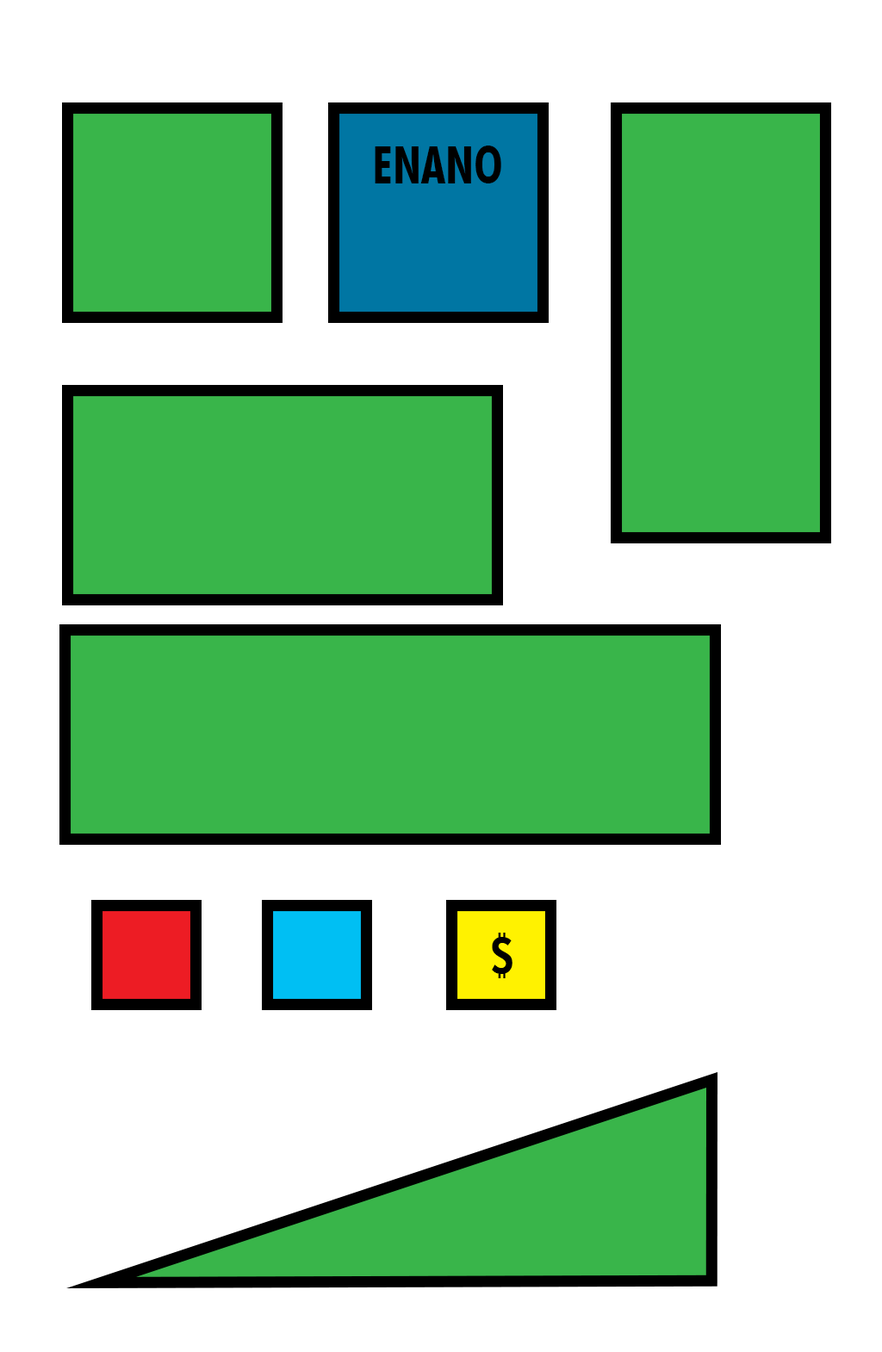
<style>
.page{position:relative;width:882px;height:1352px;background:#ffffff}
.page>*{position:absolute;margin:0}
.t1{font:51.7px "FuturaBT-BoldCondensed";color:#000000}
</style>
<div class="page">
<p class="t1" style="left:375px;top:146px;width:126px;height:37px">ENANO</p>
<p class="t1" style="left:492px;top:933px;width:20px;height:45px">$</p>
</div>
